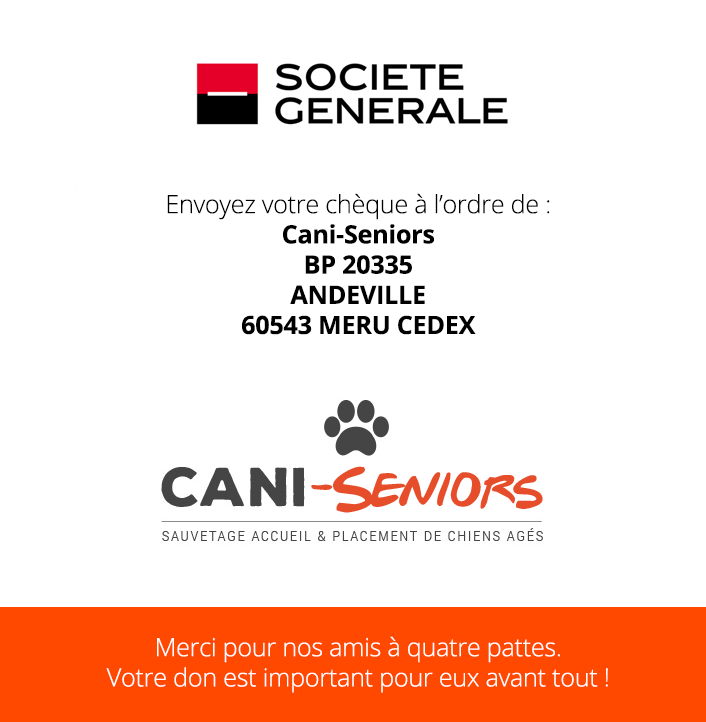
<style>
.page{position:relative;width:706px;height:722px;background:#ffffff}
.page>*{position:absolute;margin:0}
.t1{font:25.2px "OpenSans-Bold";letter-spacing:-0.01em;color:#000000}
.t2{font:25.2px/78.3px "OpenSans-Light";letter-spacing:-0.01em;color:#000000}
.t3{font:25.2px "OpenSans-Light";letter-spacing:-0.01em;color:#ffffff}
.t4{font:25.2px/78.3px "OpenSans-Light";letter-spacing:-0.01em;color:#ffffff}
</style>
<div class="page">
<p class="t1" style="left:167px;top:193px;width:383px;height:142px;text-align:center"><span class="t2">Envoyez votre chèque à l’ordre de :<br></span>Cani-Seniors<br>BP 20335<br>ANDEVILLE<br>60543 MERU CEDEX</p>
<p class="t3" style="left:106px;top:636px;width:502px;height:57px;text-align:center"><span class="t4">Merci pour nos amis à quatre pattes.<br></span>Votre don est important pour eux avant tout !</p>
</div>
